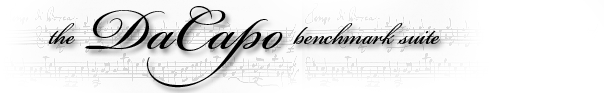
<style>
.page{position:relative;width:604px;height:93px;background:#ffffff}
.page>*{position:absolute;margin:0}
.t1{font:90px "BickhamScriptPro-Regular";color:#000000}
.t2{font:36px "BickhamScriptPro-Regular";color:#000000}
</style>
<div class="page">
<p class="t1" style="left:85px;top:6px;width:198px;height:82px">DaCapo</p>
<p class="t2" style="left:48px;top:23px;width:27px;height:21px">the</p>
<p class="t2" style="left:293px;top:23px;width:147px;height:22px">benchmark suite</p>
</div>
